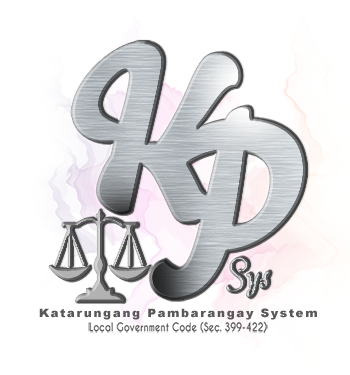
<style>
.page{position:relative;width:350px;height:375px;background:#ffffff}
.page>*{position:absolute;margin:0}
.t1{font:11.6px "Arial-Black";letter-spacing:0.1em;color:#595959;scale:1.09 1}
.t2{font:11.2px "CaviarDreams-Bold";color:#585858;scale:0.81 1}
</style>
<div class="page">
<p class="t1" style="left:39px;top:308px;width:278px;height:12px">Katarungang Pambarangay System</p>
<p class="t2" style="left:88px;top:320px;width:180px;height:13px">Local Government Code (Sec. 399-422)</p>
</div>
